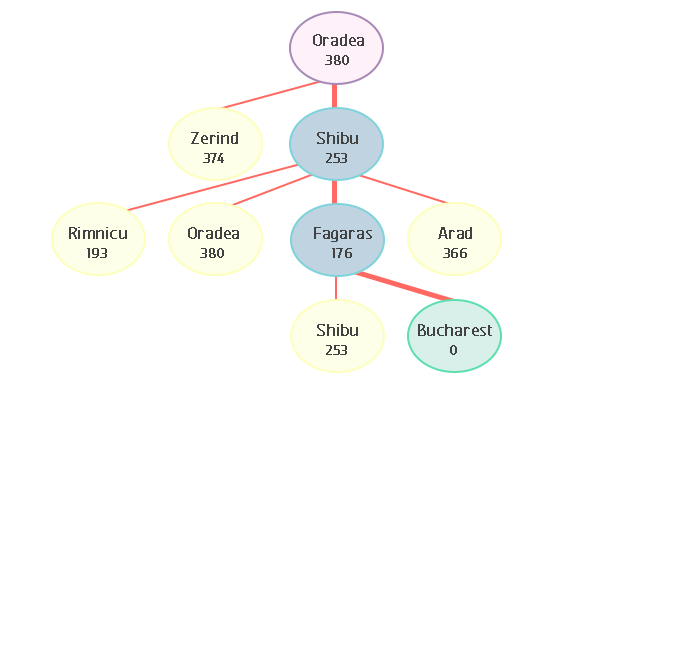
<style>
.page{position:relative;width:674px;height:660px;background:#ffffff}
.page>*{position:absolute;margin:0}
.t1{font:20.8px "FCActiveRegular";color:#424242;font-weight:bold}
.t2{font:16.7px "FCActiveRegular";color:#424141;font-weight:bold}
</style>
<div class="page">
<p class="t1" style="left:313px;top:34px;width:51px;height:12px">Oradea</p>
<p class="t2" style="left:325px;top:55px;width:24px;height:10px">380</p>
<p class="t1" style="left:191px;top:132px;width:47px;height:12px">Zerind</p>
<p class="t1" style="left:317px;top:132px;width:41px;height:12px">Shibu</p>
<p class="t2" style="left:203px;top:153px;width:21px;height:10px">374</p>
<p class="t2" style="left:326px;top:153px;width:21px;height:10px">253</p>
<p class="t1" style="left:69px;top:227px;width:58px;height:12px">Rimnicu</p>
<p class="t1" style="left:188px;top:227px;width:51px;height:12px">Oradea</p>
<p class="t1" style="left:314px;top:227px;width:58px;height:15px">Fagaras</p>
<p class="t1" style="left:438px;top:227px;width:34px;height:12px">Arad</p>
<p class="t2" style="left:87px;top:248px;width:20px;height:10px">193</p>
<p class="t2" style="left:200px;top:248px;width:24px;height:10px">380</p>
<p class="t2" style="left:332px;top:248px;width:20px;height:10px">176</p>
<p class="t2" style="left:443px;top:248px;width:24px;height:10px">366</p>
<p class="t1" style="left:317px;top:324px;width:41px;height:12px">Shibu</p>
<p class="t1" style="left:418px;top:324px;width:74px;height:12px">Bucharest</p>
<p class="t2" style="left:326px;top:345px;width:21px;height:10px">253</p>
<p class="t2" style="left:450px;top:345px;width:7px;height:10px">0</p>
</div>
